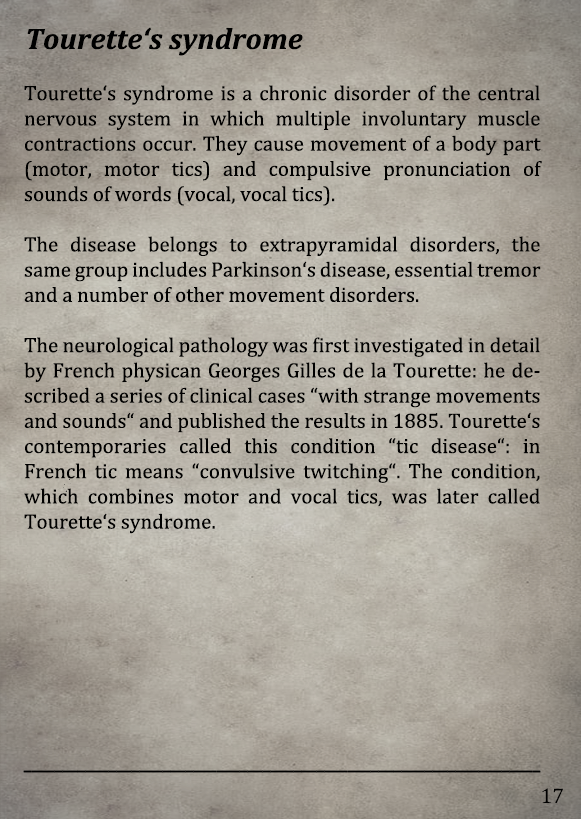
<style>
.page{position:relative;width:581px;height:819px}
.page>*{position:absolute;margin:0}
.t1{font:30px "Cambria-BoldItalic";color:#000000}
.t2{font:21px "Cambria";color:#000000}
.t3{font:21px "Arimo";color:#000000;scale:0.66 1}
.t4{font:21.5px "Cambria";color:#000000}
</style>
<div class="page">
<p class="t1" style="left:27px;top:27px;width:276px;height:29px">Tourette‘s syndrome</p>
<p class="t2" style="left:24px;top:85px;width:518px;height:449px;text-align:justify">Tourette‘s syndrome is a chronic disorder of the central nervous system in which multiple involuntary muscle contractions occur. They cause movement of a body part (motor, motor tics) and compulsive pronunciation of sounds of words (vocal, vocal tics).<br><br>The disease belongs to extrapyramidal disorders, the same group includes Parkinson‘s disease, essential tremor and a number of other movement disorders.<br><br>The neurological pathology was first investigated in detail by French physican Georges Gilles de la Tourette: he described a series of clinical cases “with strange movements and sounds“ and published the results in 1885. Tourette‘s contemporaries called this condition “tic disease“: in French tic means “convulsive twitching“. The condition, which combines motor and vocal tics, was later called Tourette‘s syndrome.</p>
<p class="t3" style="left:23px;top:770px;width:518px;height:3px">___________________________________________________________________</p>
<p class="t4" style="left:542px;top:788px;width:21px;height:15px">17</p>
</div>
